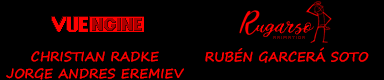
<style>
.page{position:relative;width:384px;height:80px;background:#000000}
.page>*{position:absolute;margin:0}
.t1{font:13px/17px "SegoePrint-Bold";color:#ff0000}
.t2{font:13px "SegoePrint-Bold";color:#ff0000}
</style>
<div class="page">
<p class="t1" style="left:6px;top:51px;width:178px;height:29px;text-align:center">CHRISTIAN RADKE<br>JORGE ANDRES EREMIEV</p>
<p class="t2" style="left:205px;top:47px;width:164px;height:16px">RUBÉN GARCERÁ SOTO</p>
</div>
